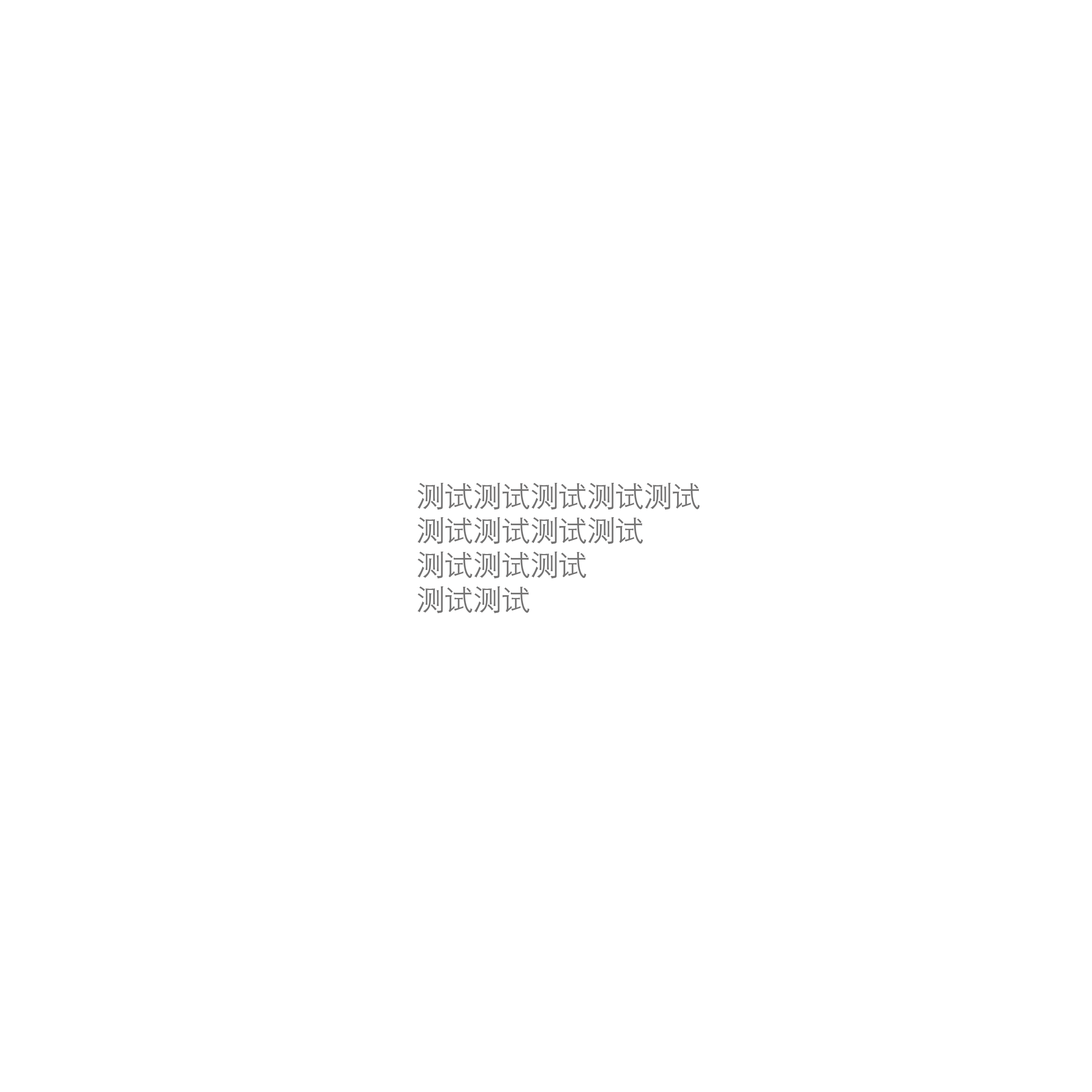
<style>
.page{position:relative;width:1092px;height:1092px;background:#ffffff}
.page>*{position:absolute;margin:0}
.t1{font:28.8px "STHeitiSC-Light";letter-spacing:-0.012em;color:#757474}
</style>
<div class="page">
<p class="t1" style="left:417px;top:483px;width:283px;height:130px;text-align:justify">测试测试测试测试测试<br>测试测试测试测试<br>测试测试测试<br>测试测试</p>
</div>
